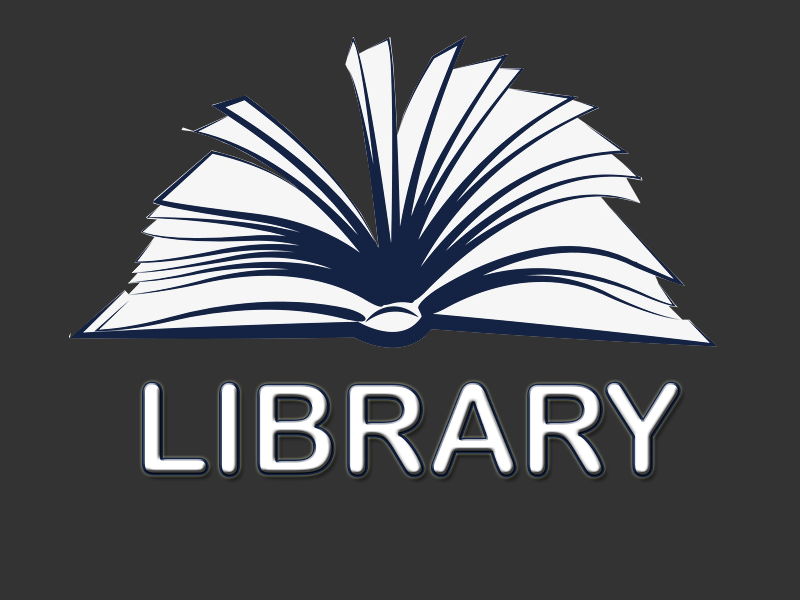
<style>
.page{position:relative;width:800px;height:600px;background:#333333}
.page>*{position:absolute;margin:0}
.t1{font:125px "ArialRoundedMTBold";color:#ffffff}
</style>
<div class="page">
<p class="t1" style="left:143px;top:383px;width:537px;height:93px">LIBRARY</p>
</div>
